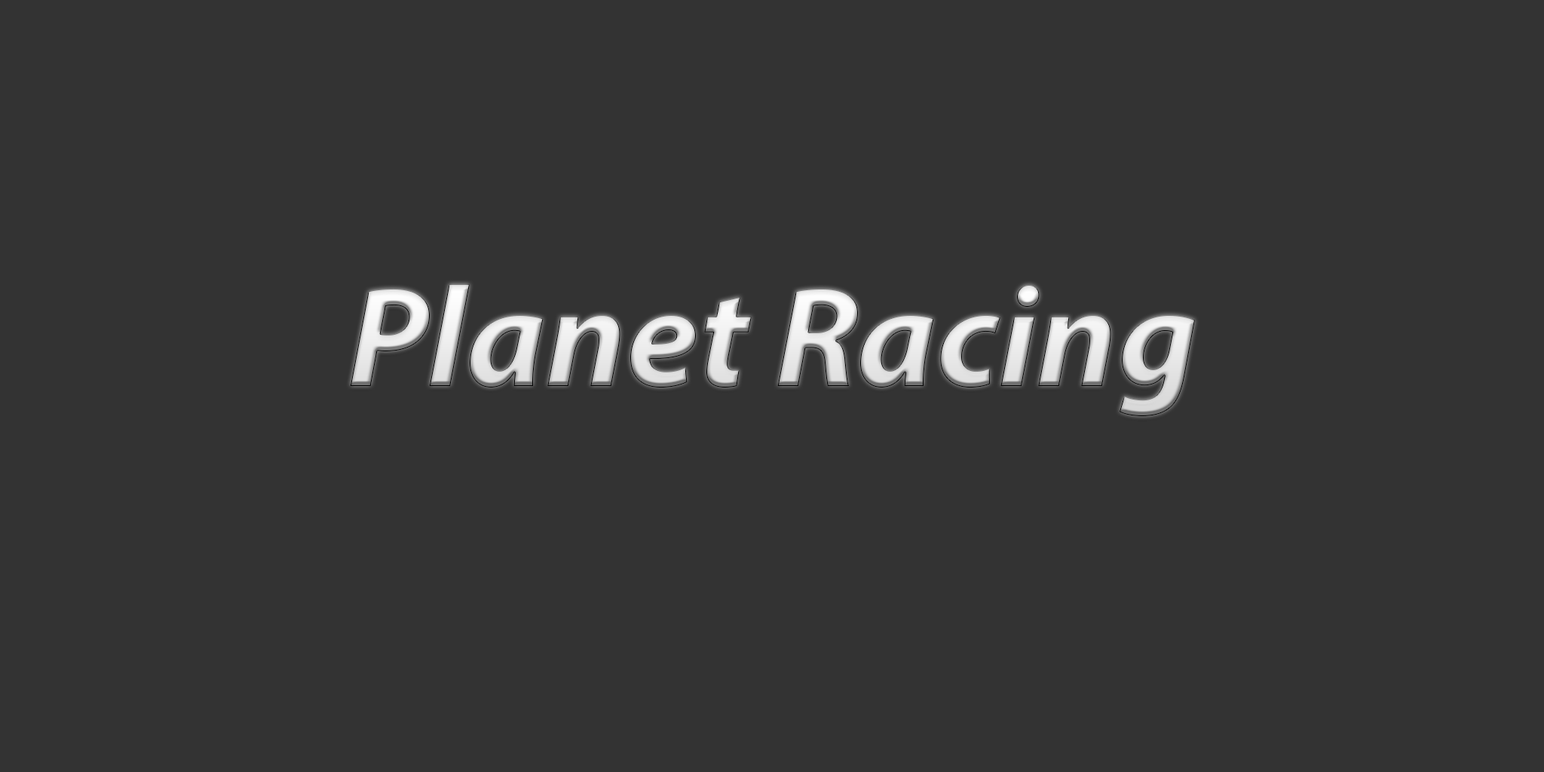
<style>
.page{position:relative;width:1544px;height:772px;background:#333333}
.page>*{position:absolute;margin:0}
.t1{font:143.6px "MyriadPro-BoldIt"}
</style>
<div class="page">
<p class="t1" style="left:350px;top:284px;width:845px;height:132px">Planet Racing</p>
</div>
